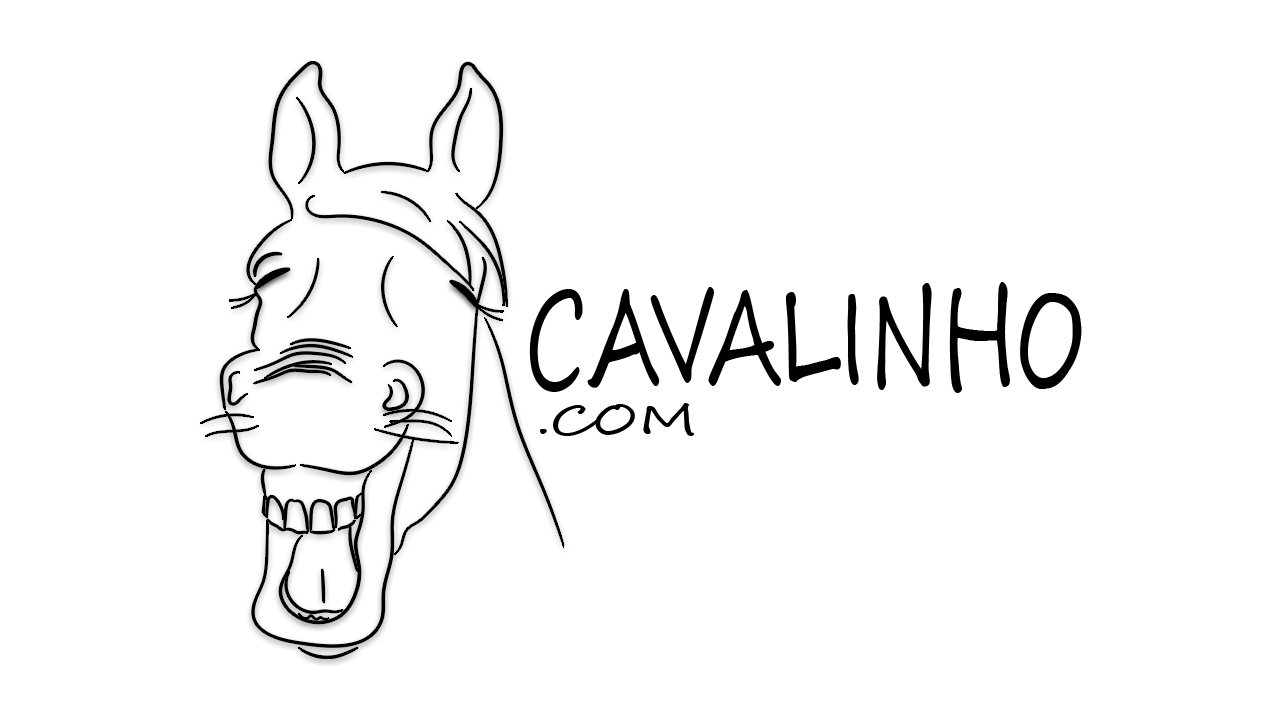
<style>
.page{position:relative;width:1280px;height:720px;background:#ffffff}
.page>*{position:absolute;margin:0}
.t1{font:129.7px "SegoeScript";color:#000000;scale:0.68 1}
.t2{font:40.9px "SegoeScript";color:#000000;scale:1.42 1}
</style>
<div class="page">
<p class="t1" style="left:529px;top:282px;width:553px;height:111px">CAVALINHO</p>
<p class="t2" style="left:540px;top:403px;width:154px;height:33px">.COM</p>
</div>
